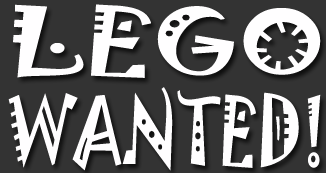
<style>
.page{position:relative;width:326px;height:173px;background:#333333}
.page>*{position:absolute;margin:0}
.t1{font:84px/90px "Jokerman-Regular";color:#fffeff;scale:0.75 1}
.t2{font:84px/90px "Jokerman-Regular";color:#fffeff;scale:1.36 1}
</style>
<div class="page">
<p class="t1" style="left:8px;top:4px;width:313px;height:167px"><span class="t2">LEGO<br></span>WANTED!</p>
</div>
